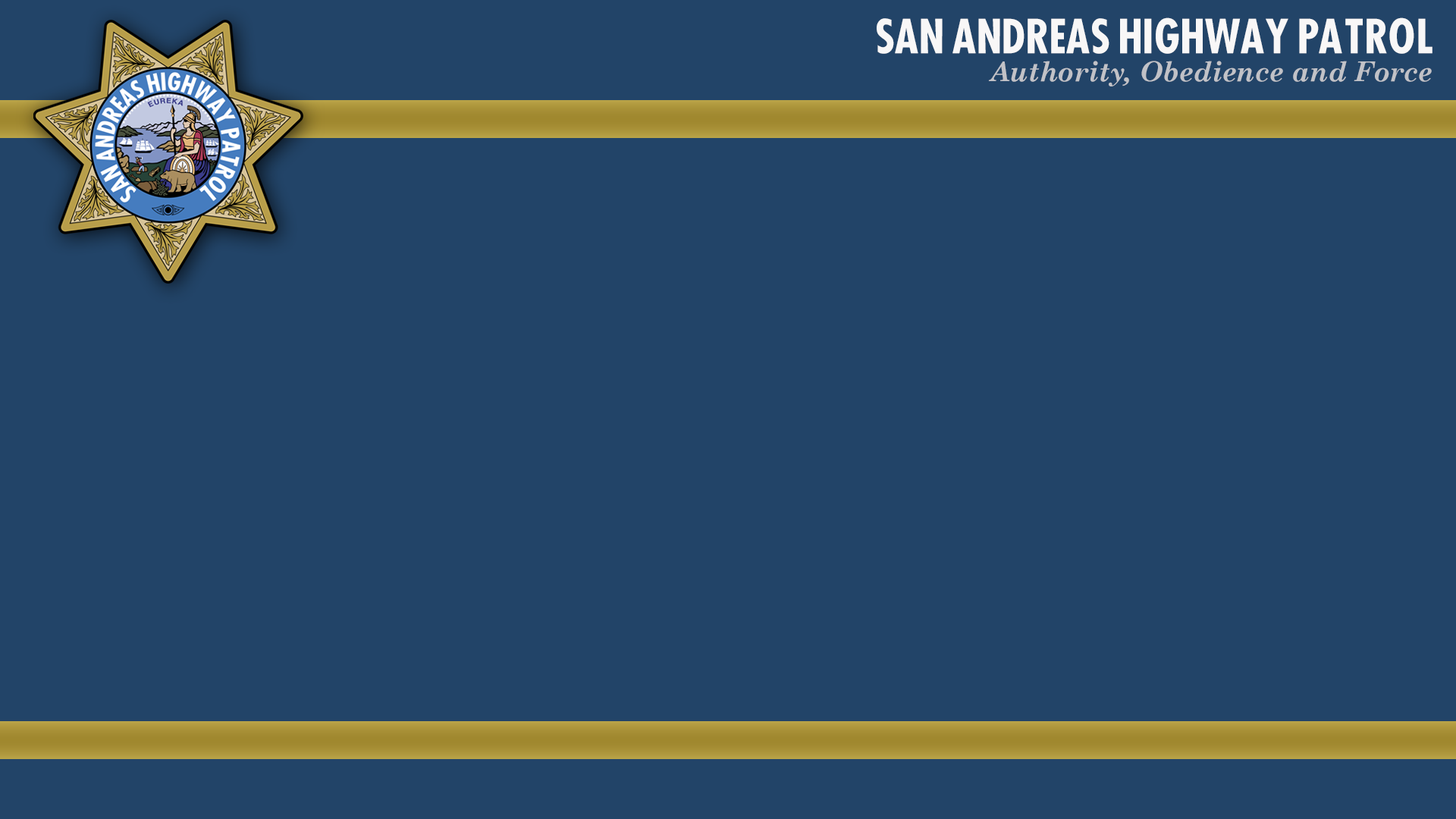
<style>
.page{position:relative;width:1456px;height:819px;background:#224468}
.page>*{position:absolute;margin:0}
.t1{font:45.5px "FuturaCondBold";letter-spacing:-0.025em;color:#f8f7f7}
.t2{font:27.3px "CenturySchoolbook-BoldItalic";color:#c1c2c7}
</style>
<div class="page">
<p class="t1" style="left:877px;top:17px;width:555px;height:37px">SAN ANDREAS HIGHWAY PATROL</p>
<p class="t2" style="left:988px;top:61px;width:444px;height:25px">Authority, Obedience and Force</p>
</div>
